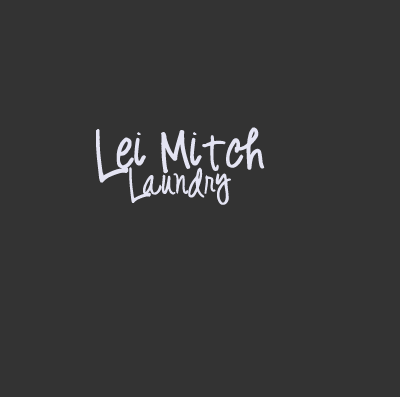
<style>
.page{position:relative;width:400px;height:397px;background:#333333}
.page>*{position:absolute;margin:0}
.t1{font:36px "DigsMyHart";color:#e4e4f3}
.t2{font:24px "DigsMyHart";color:#e4e4f3}
</style>
<div class="page">
<p class="t1" style="left:96px;top:127px;width:169px;height:78px;text-align:center">Lei Mitch<br><span class="t2">Laundry</span></p>
</div>
